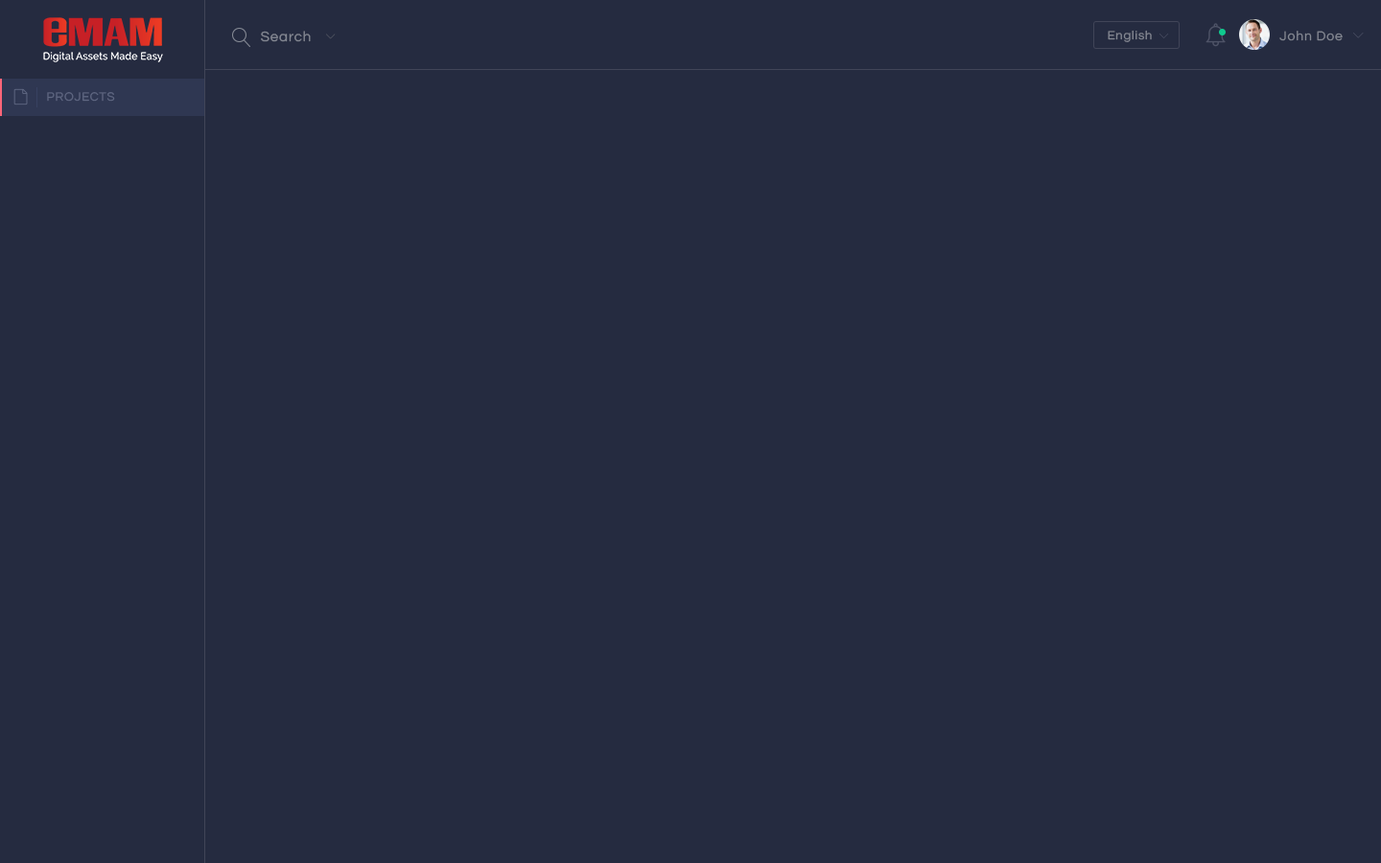
<style>
.page{position:relative;width:1381px;height:863px;background:#252b40}
.page>*{position:absolute;margin:0}
.t1{font:12.5px "Questrial-Regular";letter-spacing:0.06em;color:#848893}
.t2{font:14.4px "Questrial-Regular";letter-spacing:0.06em;color:#848893}
.t3{font:13.4px "Questrial-Regular";letter-spacing:0.06em;color:#848893}
.t4{font:12.5px "Questrial-Regular";letter-spacing:0.06em;color:#606883;text-transform:uppercase}
</style>
<div class="page">
<p class="t1" style="left:1108px;top:30px;width:44px;height:12px">English</p>
<p class="t2" style="left:261px;top:31px;width:50px;height:11px">Search</p>
<p class="t3" style="left:1280px;top:31px;width:63px;height:10px">John Doe</p>
<p class="t4" style="left:47px;top:92px;width:68px;height:10px">Projects</p>
</div>
